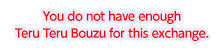
<style>
.page{position:relative;width:224px;height:50px;background:#ffffff}
.page>*{position:absolute;margin:0}
.t1{font:12px/17px "UDShinGoPro-DeBold";letter-spacing:-0.04em;color:#ff0000}
</style>
<div class="page">
<p class="t1" style="left:15px;top:10px;width:194px;height:31px;text-align:center">You do not have enough<br>Teru Teru Bouzu for this exchange.</p>
</div>
